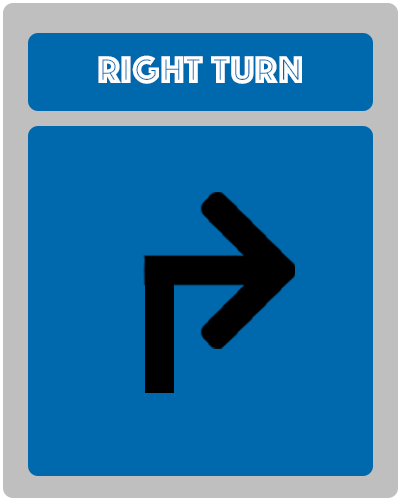
<style>
.page{position:relative;width:400px;height:500px;background:#0069ae}
.page>*{position:absolute;margin:0}
.t1{font:40px "Phosphate-Inline";color:#fefefe}
</style>
<div class="page">
<p class="t1" style="left:98px;top:55px;width:204px;height:29px">RIGHT TURN</p>
</div>
